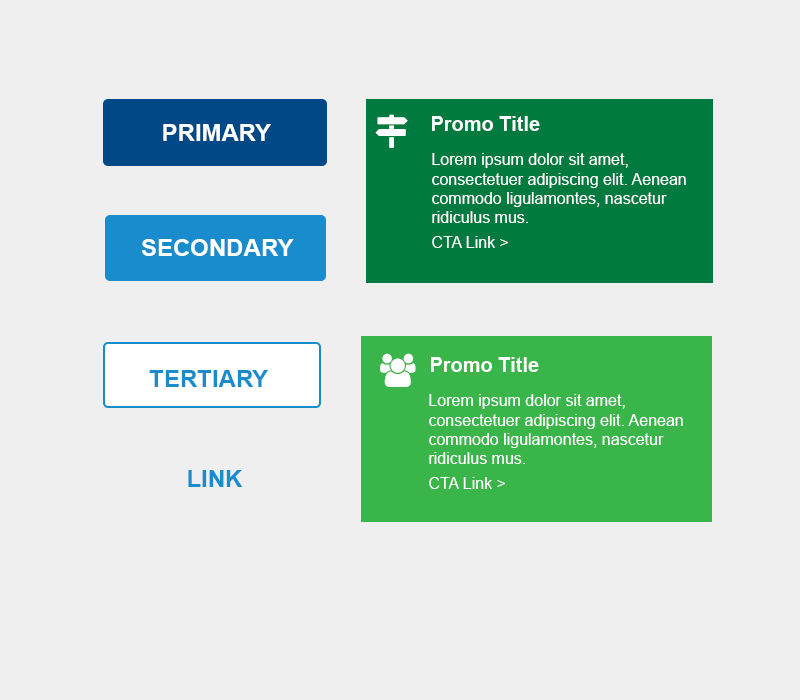
<style>
.page{position:relative;width:800px;height:700px;background:#efefef}
.page>*{position:absolute;margin:0}
.t1{font:24px "Arial-BoldMT";color:#ffffff;text-transform:uppercase}
.t2{font:20px "Arial-BoldMT";color:#ffffff}
.t3{font:16px "ArialMT";color:#ffffff}
.t4{font:24px "Arial-BoldMT";color:#188ccc;text-transform:uppercase}
</style>
<div class="page">
<p class="t1" style="left:163px;top:124px;width:108px;height:17px">Primary</p>
<p class="t2" style="left:432px;top:116px;width:108px;height:15px">Promo Title</p>
<p class="t3" style="left:432px;top:153px;width:254px;height:95px">Lorem ipsum dolor sit amet, consectetuer adipiscing elit. Aenean commodo ligulamontes, nascetur ridiculus mus.<br>CTA Link &gt;</p>
<p class="t1" style="left:141px;top:239px;width:153px;height:17px">Secondary</p>
<p class="t2" style="left:431px;top:357px;width:108px;height:15px">Promo Title</p>
<p class="t4" style="left:149px;top:370px;width:119px;height:17px">Tertiary</p>
<p class="t3" style="left:429px;top:394px;width:254px;height:95px">Lorem ipsum dolor sit amet, consectetuer adipiscing elit. Aenean commodo ligulamontes, nascetur ridiculus mus.<br>CTA Link &gt;</p>
<p class="t4" style="left:188px;top:470px;width:55px;height:17px">Link</p>
</div>
